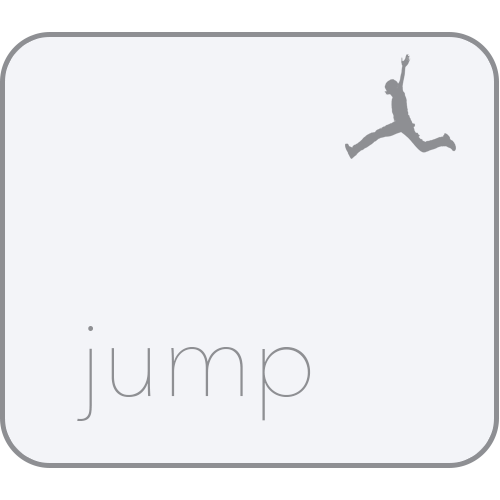
<style>
.page{position:relative;width:500px;height:500px;background:#f3f4f8}
.page>*{position:absolute;margin:0}
.t1{font:103.1px "AvenirNext-UltraLight";color:#8e8f93}
</style>
<div class="page">
<p class="t1" style="left:77px;top:326px;width:234px;height:95px">jump</p>
</div>
